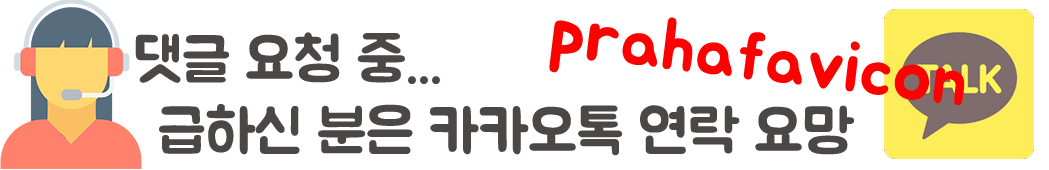
<style>
.page{position:relative;width:1049px;height:170px;background:#ffffff}
.page>*{position:absolute;margin:0}
.t1{font:72px "BMJUA";color:#ff0000}
.t2{font:60px "BMJUA";color:#4c4747}
</style>
<div class="page">
<p class="t1" style="left:549px;top:17px;width:416px;height:89px;rotate:7deg">prahafavicon</p>
<p class="t2" style="left:135px;top:32px;width:719px;height:124px">댓글 요청 중...<br>      급하신 분은 카카오톡 연락 요망</p>
</div>
